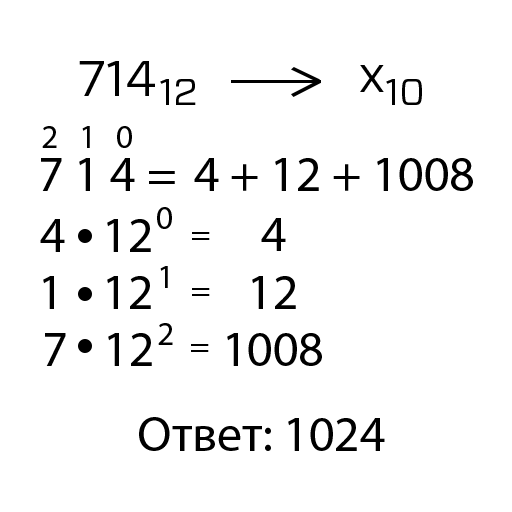
<style>
.page{position:relative;width:512px;height:512px;background:#ffffff}
.page>*{position:absolute;margin:0}
.t1{font:50px "Forza-Book";color:#000000}
.t2{font:37.5px "Forza-Book";color:#000000}
.t3{font:33.3px "MyriadPro-Regular";color:#000000}
.t4{font:50px "MyriadPro-Regular";color:#000000}
</style>
<div class="page">
<p class="t1" style="left:79px;top:61px;width:76px;height:35px">714</p>
<p class="t1" style="left:360px;top:65px;width:24px;height:27px">x</p>
<p class="t2" style="left:160px;top:79px;width:36px;height:26px">12</p>
<p class="t2" style="left:386px;top:79px;width:36px;height:26px">10</p>
<p class="t3" style="left:42px;top:126px;width:15px;height:22px">2</p>
<p class="t3" style="left:82px;top:126px;width:8px;height:22px">1</p>
<p class="t3" style="left:117px;top:126px;width:15px;height:22px">0</p>
<p class="t4" style="left:41px;top:158px;width:134px;height:33px">7 1 4 =</p>
<p class="t4" style="left:194px;top:158px;width:279px;height:33px">4 + 12 + 1008</p>
<p class="t3" style="left:157px;top:207px;width:15px;height:22px">0</p>
<p class="t4" style="left:40px;top:219px;width:25px;height:33px">4</p>
<p class="t4" style="left:107px;top:219px;width:44px;height:33px">12</p>
<p class="t3" style="left:192px;top:232px;width:18px;height:8px">=</p>
<p class="t3" style="left:160px;top:266px;width:8px;height:22px">1</p>
<p class="t4" style="left:43px;top:276px;width:11px;height:33px">1</p>
<p class="t4" style="left:107px;top:276px;width:44px;height:33px">12</p>
<p class="t4" style="left:252px;top:276px;width:44px;height:33px">12</p>
<p class="t3" style="left:192px;top:288px;width:18px;height:8px">=</p>
<p class="t3" style="left:158px;top:323px;width:15px;height:22px">2</p>
<p class="t4" style="left:45px;top:333px;width:21px;height:33px">7</p>
<p class="t4" style="left:108px;top:333px;width:44px;height:33px">12</p>
<p class="t4" style="left:227px;top:333px;width:95px;height:33px">1008</p>
<p class="t3" style="left:191px;top:344px;width:18px;height:8px">=</p>
<p class="t4" style="left:139px;top:417px;width:246px;height:34px">Ответ: 1024</p>
</div>
